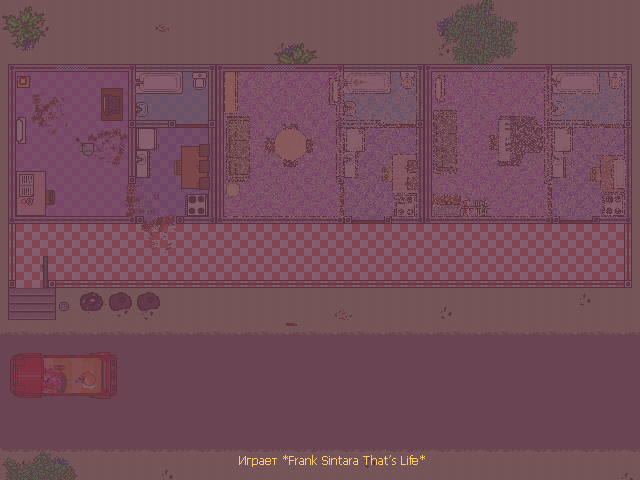
<style>
.page{position:relative;width:640px;height:480px}
.page>*{position:absolute;margin:0}
.t1{font:12px "Tahoma";color:#ffcd59}
</style>
<div class="page">
<p class="t1" style="left:239px;top:455px;width:186px;height:12px">Играет *Frank Sintara That’s Life*</p>
</div>
